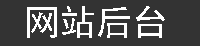
<style>
.page{position:relative;width:200px;height:46px;background:#333333}
.page>*{position:absolute;margin:0}
.t1{font:36px "SimHei";color:#ffffff}
</style>
<div class="page">
<p class="t1" style="left:27px;top:6px;width:138px;height:32px">网站后台</p>
</div>
